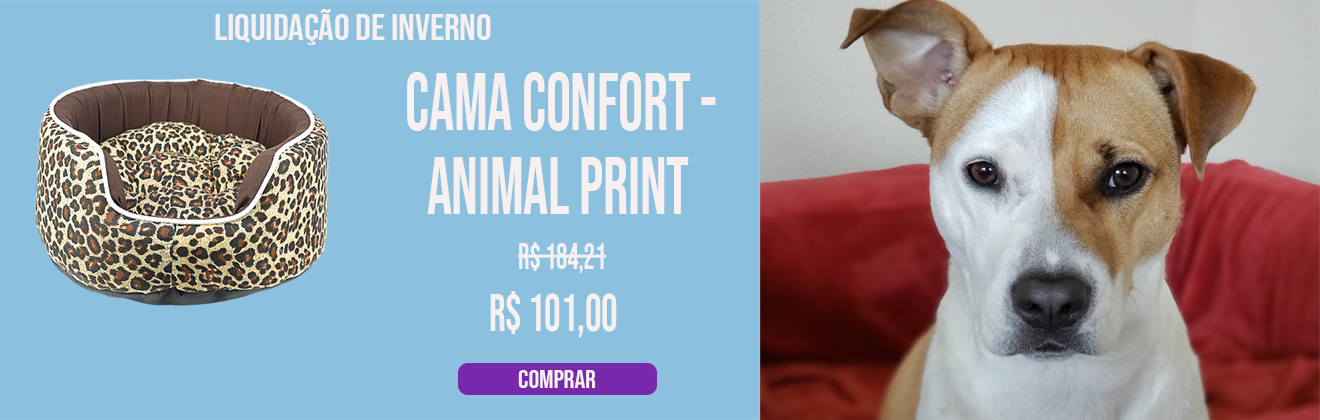
<style>
.page{position:relative;width:1320px;height:420px;background:#8bc0df}
.page>*{position:absolute;margin:0}
.t1{font:36.8px "BebasNeue-Regular";letter-spacing:-0.005em;color:#f7f0f0;scale:1.06 1}
.t2{font:81.4px "BebasNeue-Regular";letter-spacing:-0.005em;color:#f7f0f0;scale:0.77 1}
.t3{font:36.8px "BebasNeue-Regular";letter-spacing:-0.005em;color:#f7f0f0;scale:0.77 1}
.t4{font:53.7px "BebasNeue-Regular";letter-spacing:-0.005em;color:#f7f0f0;scale:0.77 1}
.t5{font:25.4px "BebasNeue-Regular";letter-spacing:-0.005em;color:#f7f0f0;scale:1.06 1}
</style>
<div class="page">
<p class="t1" style="left:215px;top:8px;width:276px;height:37px">liquidação de inverno</p>
<p class="t2" style="left:407px;top:72px;width:309px;height:59px">cama confort -</p>
<p class="t2" style="left:427px;top:157px;width:262px;height:57px">animal print</p>
<p class="t3" style="left:518px;top:242px;width:89px;height:32px">r$ 184,21</p>
<p class="t4" style="left:490px;top:291px;width:127px;height:47px">R$ 101,00</p>
<p class="t5" style="left:518px;top:370px;width:78px;height:18px">comprar</p>
</div>
